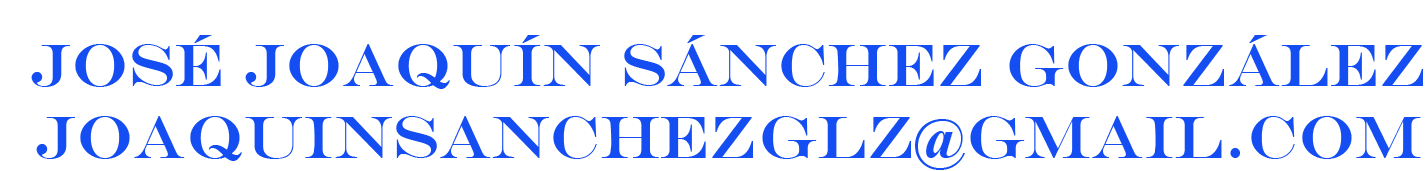
<style>
.page{position:relative;width:1427px;height:171px;background:#ffffff}
.page>*{position:absolute;margin:0}
.t1{font:59.5px "EngraversMT";color:#144df2}
</style>
<div class="page">
<p class="t1" style="left:31px;top:35px;width:1392px;height:135px;text-align:center">José joaquín Sánchez González<br>joaquinsanchezglz@gmail.com</p>
</div>
